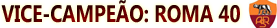
<style>
.page{position:relative;width:277px;height:28px}
.page>*{position:absolute;margin:0}
.t1{font:24px "Ebrima-Bold";scale:0.8 1}
</style>
<div class="page">
<p class="t1" style="left:1px;top:0px;width:239px;height:23px">VICE-CAMPEÃO: ROMA 40</p>
</div>
